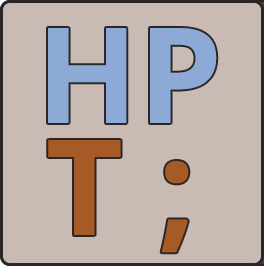
<style>
.page{position:relative;width:264px;height:266px;background:#c9bab3}
.page>*{position:absolute;margin:0}
.t1{font:132.8px "OpenSans-Bold";color:#8caad5}
.t2{font:132.8px "OpenSans-Bold";color:#a65a25}
</style>
<div class="page">
<p class="t1" style="left:48px;top:28px;width:169px;height:95px">HP</p>
<p class="t2" style="left:48px;top:140px;width:141px;height:113px">T ;</p>
</div>
